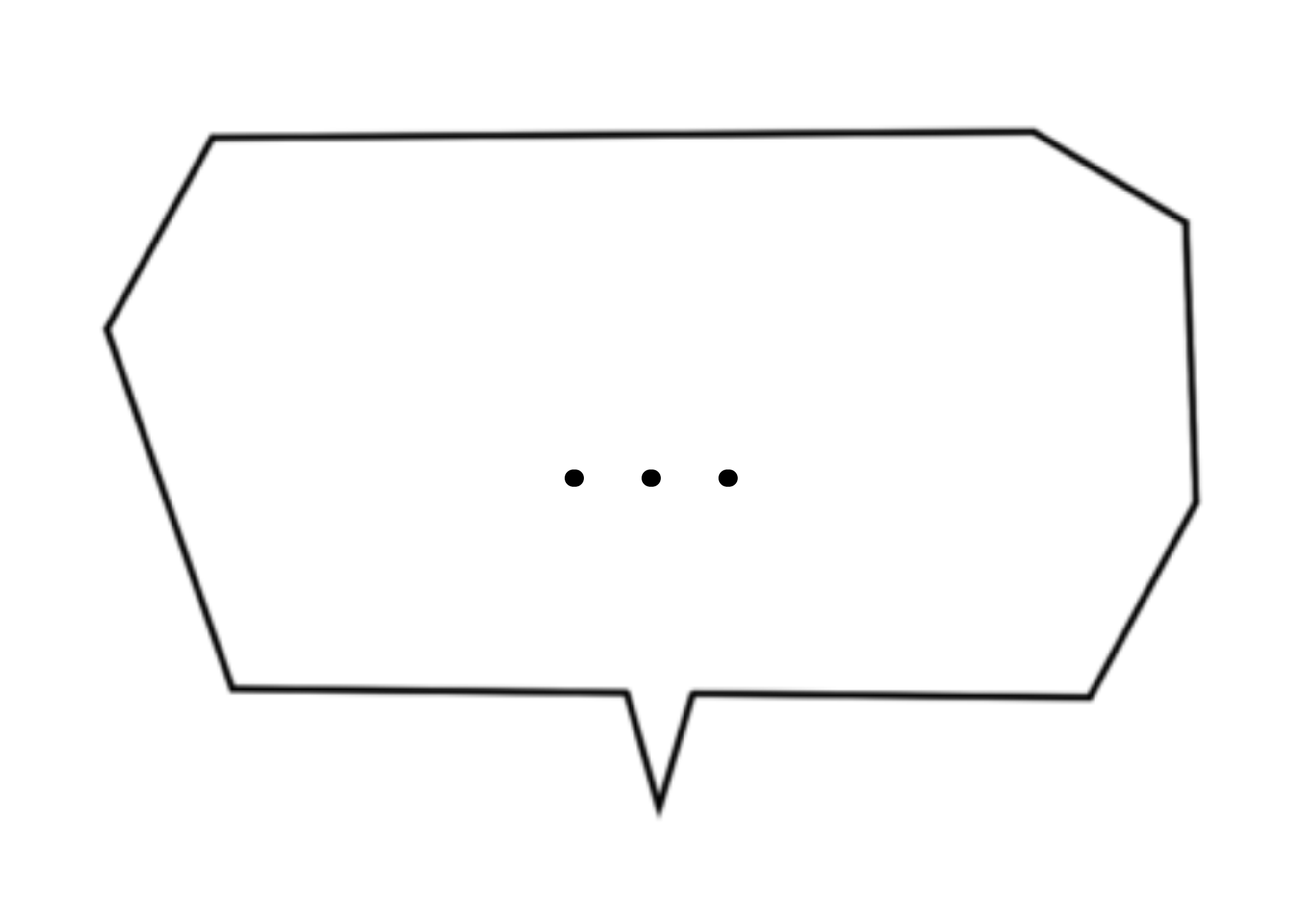
<style>
.page{position:relative;width:1292px;height:923px;background:#ffffff}
.page>*{position:absolute;margin:0}
.t1{font:128.2px "CourierNewPSMT";color:#000000}
</style>
<div class="page">
<p class="t1" style="left:564px;top:469px;width:174px;height:18px">...</p>
</div>
